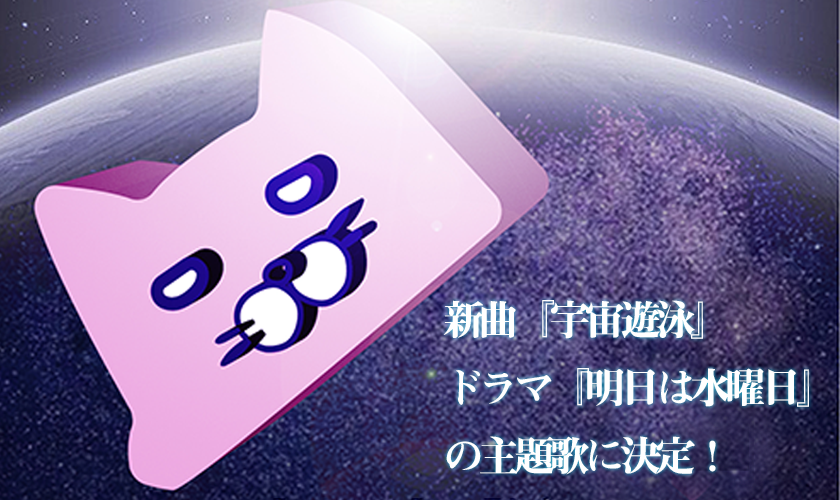
<style>
.page{position:relative;width:840px;height:500px}
.page>*{position:absolute;margin:0}
.t1{font:41px/68.2px "MidashiMinPr6N-MA31";letter-spacing:-0.14em;color:#ffffff}
</style>
<div class="page">
<p class="t1" style="left:443px;top:300px;width:366px;height:175px">新曲『宇宙遊泳』<br>ドラマ『明日は水曜日』<br>の主題歌に決定  !</p>
</div>
